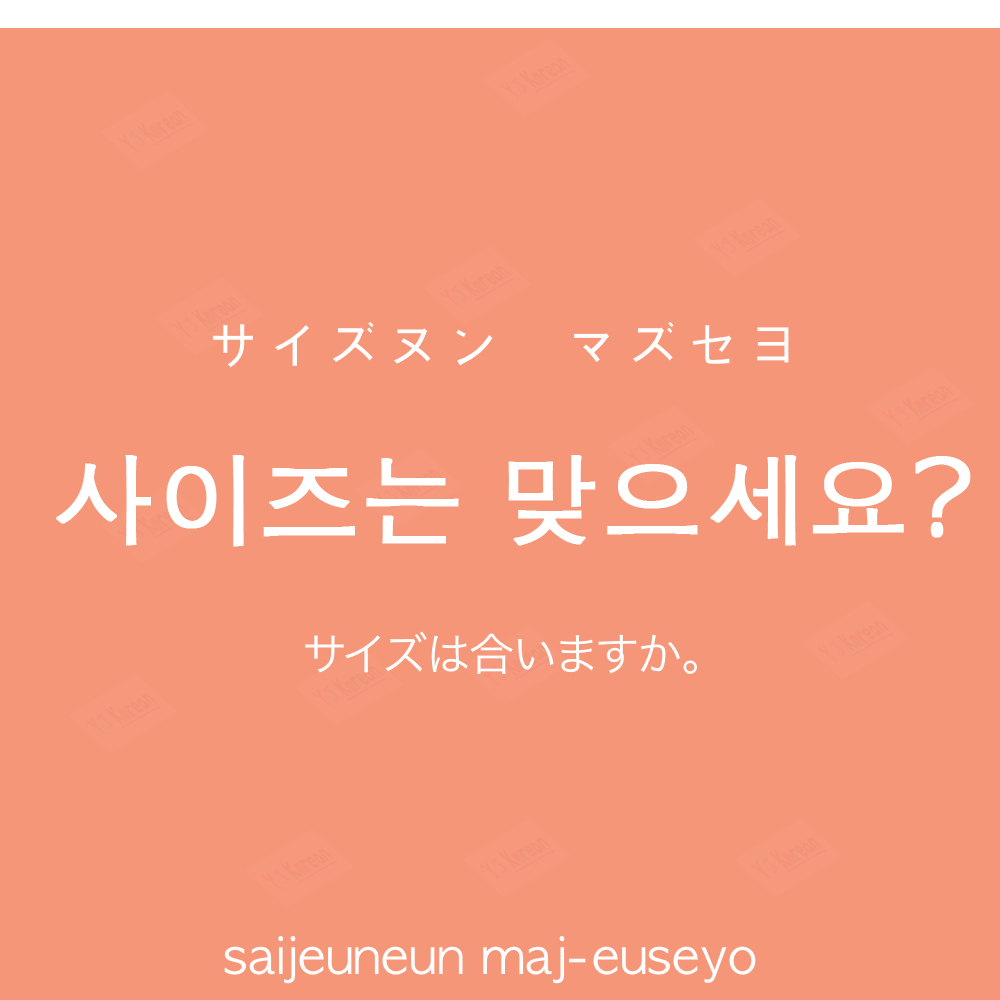
<style>
.page{position:relative;width:1000px;height:1000px;background:#f69679}
.page>*{position:absolute;margin:0}
.t1{font:60px "AppleGothic";color:#ffffff}
.t2{font:100px "AppleGothic";color:#ffffff;font-weight:bold}
.t3{font:45px "HiraKakuProN-W3";color:#ffffff}
.t4{font:50px "AppleGothic";color:#ffffff}
</style>
<div class="page">
<p class="t1" style="left:212px;top:322px;width:577px;height:46px">サイズヌン　マズセヨ</p>
<p class="t2" style="left:56px;top:455px;width:915px;height:92px">사이즈는 맞으세요?</p>
<p class="t3" style="left:305px;top:631px;width:392px;height:43px">サイズは合いますか。</p>
<p class="t4" style="left:224px;top:936px;width:532px;height:48px">saijeuneun maj-euseyo</p>
</div>
